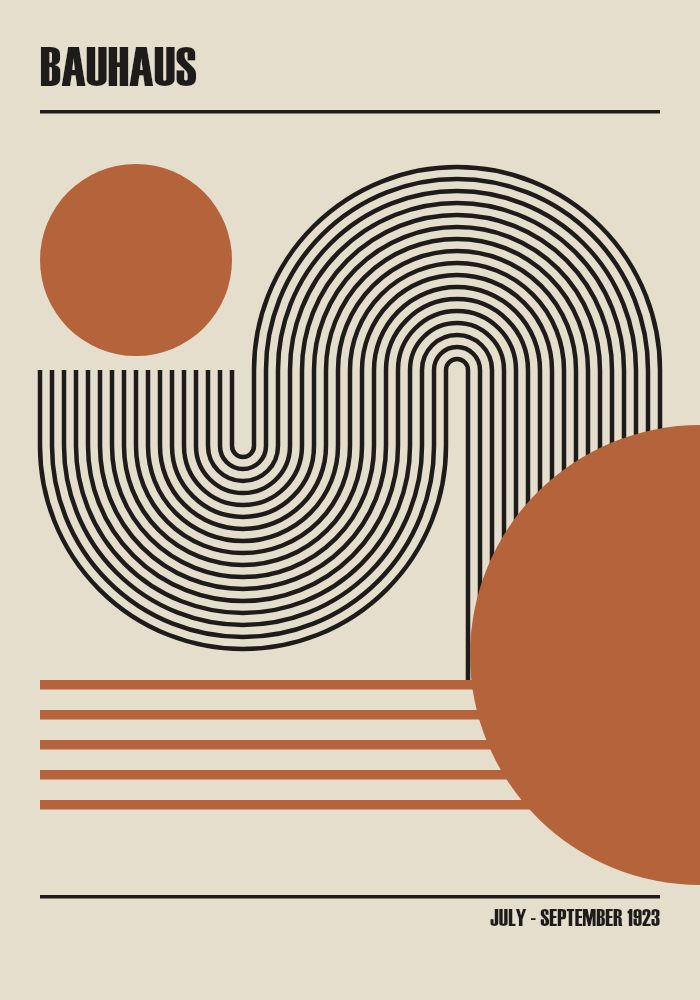
<style>
.page{position:relative;width:700px;height:1000px;background:#e5decc}
.page>*{position:absolute;margin:0}
.t1{font:56px "Haettenschweiler-Bold";letter-spacing:0.018em;color:#1e1c1a;font-weight:bold}
.t2{font:24px "Haettenschweiler-Bold";letter-spacing:0.042em;color:#1e1c1a;font-weight:bold}
</style>
<div class="page">
<p class="t1" style="left:40px;top:45px;width:164px;height:70px">BAUHAUS</p>
<p class="t2" style="left:40px;top:908px;width:620px;height:30px">JULY - SEPTEMBER 1923</p>
</div>
